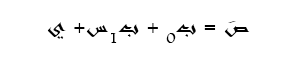
<style>
.page{position:relative;width:298px;height:57px;background:#ffffff}
.page>*{position:absolute;margin:0}
.t1{font:21.1px "Andalus";color:#000000}
</style>
<div class="page">
<p class="t1" style="left:47px;top:21px;width:203px;height:22px">صَ = ب0 + ب1س+ ي</p>
</div>
